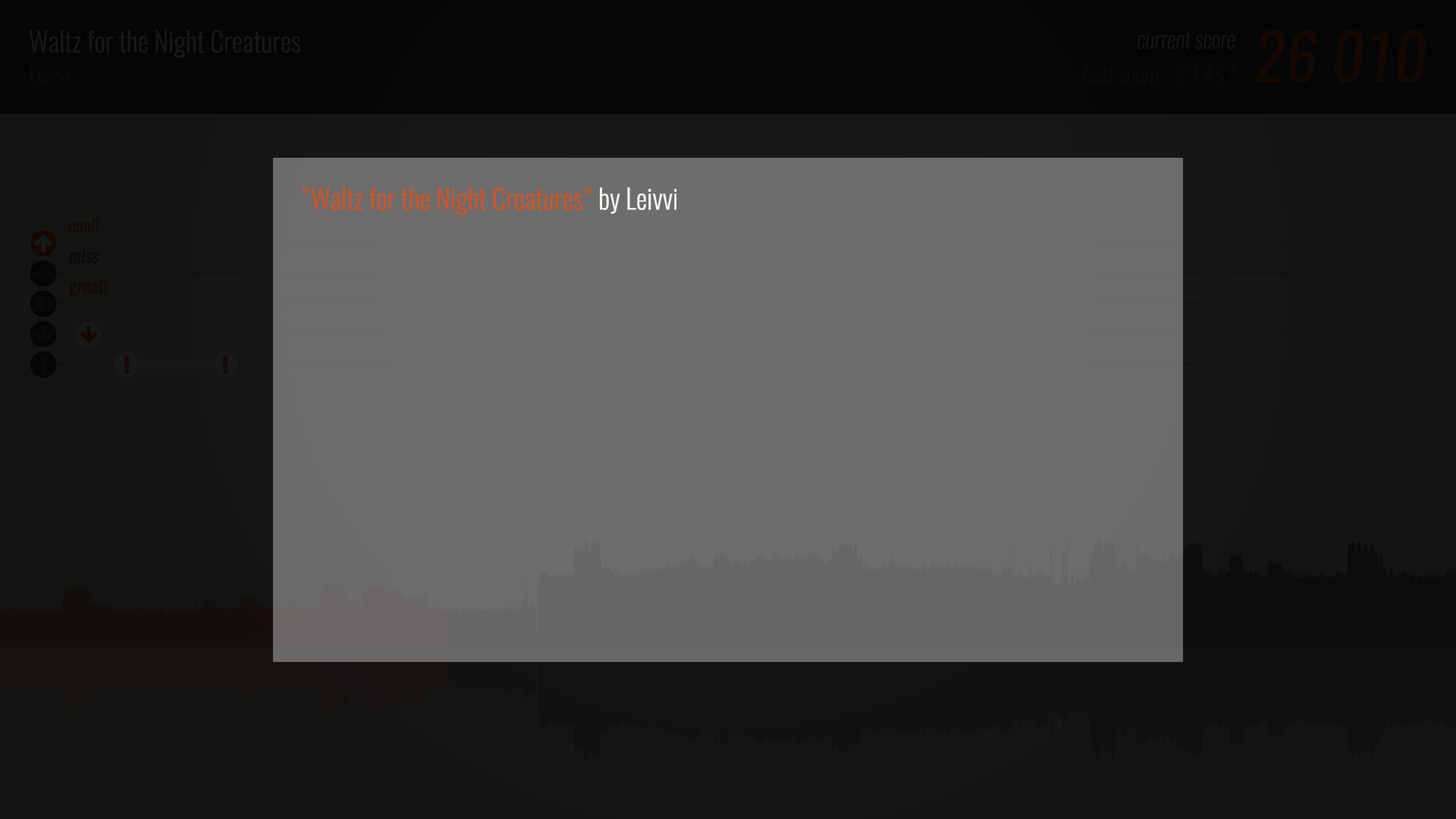
<style>
.page{position:relative;width:1456px;height:819px}
.page>*{position:absolute;margin:0}
.t1{font:27.3px "Oswald-Light";color:#181818}
.t2{font:63.7px "Oswald-RegularItalic";color:#150803}
.t3{font:22.7px "Oswald-Extra-LightItalic";color:#181818}
.t4{font:22.7px "Oswald-Extra-LightItalic";color:#0b0b0b}
.t5{font:27.3px "Oswald-Light";color:#d55320}
.t6{font:27.3px "Oswald-Light";color:#f8f4f0}
.t7{font:18.2px "Oswald-RegularItalic";color:#150803}
.t8{font:18.2px "Oswald-RegularItalic";color:#090909}
</style>
<div class="page">
<p class="t1" style="left:30px;top:30px;width:271px;height:28px">Waltz for the Night Creatures</p>
<p class="t2" style="left:1255px;top:30px;width:171px;height:53px">26 010</p>
<p class="t3" style="left:1137px;top:31px;width:98px;height:18px">current score</p>
<p class="t4" style="left:29px;top:65px;width:42px;height:20px">Leivvi</p>
<p class="t4" style="left:1083px;top:65px;width:152px;height:20px">best score    23 457</p>
<p class="t5" style="left:303px;top:187px;width:373px;height:28px">"Waltz for the Night Creatures"<span class="t6"> by Leivvi</span></p>
<p class="t7" style="left:68px;top:218px;width:31px;height:16px">cool!</p>
<p class="t8" style="left:69px;top:249px;width:30px;height:15px">miss</p>
<p class="t7" style="left:68px;top:278px;width:40px;height:19px">great!</p>
</div>
